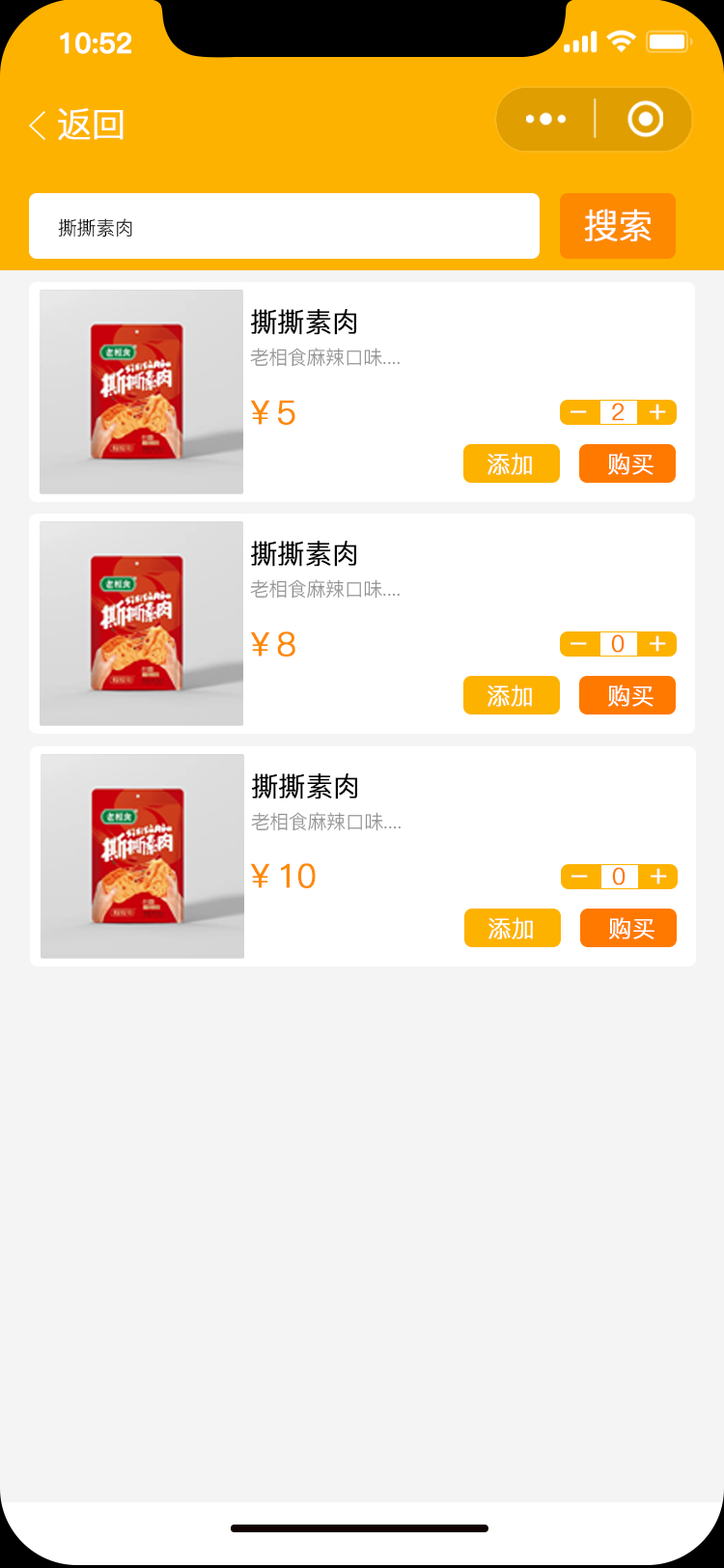
<style>
.page{position:relative;width:724px;height:1568px;background:#f4f4f4}
.page>*{position:absolute;margin:0}
.t1{font:27.5px "PingFang-SC-Bold";letter-spacing:-0.02em;color:#ffffff;font-weight:bold}
.t2{font:34.8px "PingFang-SC-Regular";letter-spacing:-0.02em;color:#ffffff;font-weight:bold}
.t3{font:19.3px "PingFang-SC-Regular";letter-spacing:-0.02em;color:#000000}
.t4{font:27px "PingFang-SC-Regular";letter-spacing:-0.02em;color:#000000;font-weight:bold}
.t5{font:19.3px "PingFang-SC-Regular";letter-spacing:-0.02em;color:#919191}
.t6{font:32.8px "PingFang-SC-Regular";letter-spacing:-0.02em;color:#fd8900;font-weight:bold}
.t7{font:29px "PingFang-SC-Regular";letter-spacing:-0.02em;color:#ffffff;font-weight:bold}
.t8{font:23.2px "PingFang-SC-Regular";letter-spacing:-0.02em;color:#ff7900;font-weight:bold}
.t9{font:23.2px "PingFang-SC-Regular";letter-spacing:-0.02em;color:#ffffff;font-weight:bold}
</style>
<div class="page">
<p class="t1" style="left:60px;top:32px;width:71px;height:22px">10:52</p>
<p class="t2" style="left:58px;top:108px;width:66px;height:32px">返回</p>
<p class="t2" style="left:584px;top:209px;width:68px;height:32px">搜索</p>
<p class="t3" style="left:58px;top:218px;width:74px;height:20px">撕撕素肉</p>
<p class="t4" style="left:251px;top:309px;width:105px;height:26px">撕撕素肉</p>
<p class="t5" style="left:250px;top:348px;width:150px;height:19px">老相食麻辣口味....</p>
<p class="t6" style="left:251px;top:400px;width:44px;height:25px">￥5</p>
<p class="t7" style="left:571px;top:410px;width:16px;height:3px">-</p>
<p class="t8" style="left:612px;top:403px;width:12px;height:18px">2</p>
<p class="t7" style="left:650px;top:404px;width:16px;height:16px">+</p>
<p class="t9" style="left:488px;top:453px;width:44px;height:22px">添加</p>
<p class="t9" style="left:608px;top:453px;width:46px;height:22px">购买</p>
<p class="t4" style="left:251px;top:541px;width:105px;height:26px">撕撕素肉</p>
<p class="t5" style="left:250px;top:579px;width:150px;height:20px">老相食麻辣口味....</p>
<p class="t6" style="left:251px;top:631px;width:44px;height:26px">￥8</p>
<p class="t8" style="left:611px;top:634px;width:14px;height:19px">0</p>
<p class="t7" style="left:650px;top:635px;width:16px;height:17px">+</p>
<p class="t7" style="left:571px;top:642px;width:16px;height:3px">-</p>
<p class="t9" style="left:488px;top:685px;width:44px;height:22px">添加</p>
<p class="t9" style="left:608px;top:685px;width:46px;height:22px">购买</p>
<p class="t4" style="left:252px;top:773px;width:105px;height:26px">撕撕素肉</p>
<p class="t5" style="left:251px;top:812px;width:150px;height:19px">老相食麻辣口味....</p>
<p class="t6" style="left:251px;top:863px;width:65px;height:25px">￥10</p>
<p class="t8" style="left:612px;top:867px;width:14px;height:18px">0</p>
<p class="t7" style="left:651px;top:868px;width:16px;height:16px">+</p>
<p class="t7" style="left:572px;top:875px;width:16px;height:3px">-</p>
<p class="t9" style="left:489px;top:917px;width:44px;height:22px">添加</p>
<p class="t9" style="left:609px;top:917px;width:46px;height:22px">购买</p>
</div>
